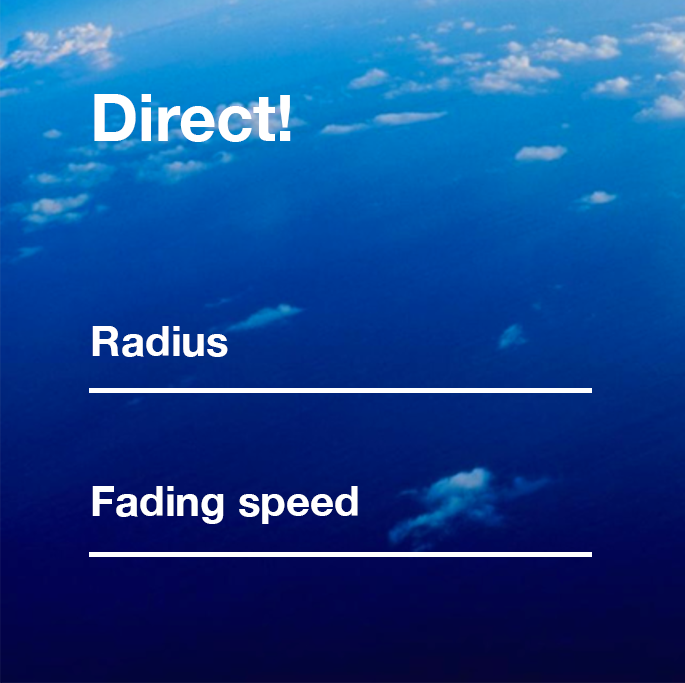
<style>
.page{position:relative;width:685px;height:683px}
.page>*{position:absolute;margin:0}
.t1{font:65px "HelveticaNeue-Bold";color:#ffffff}
.t2{font:42px "HelveticaNeue-Bold";color:#ffffff}
</style>
<div class="page">
<p class="t1" style="left:94px;top:94px;width:197px;height:48px">Direct!</p>
<p class="t2" style="left:92px;top:326px;width:136px;height:31px">Radius</p>
<p class="t2" style="left:92px;top:486px;width:266px;height:38px">Fading speed</p>
</div>
